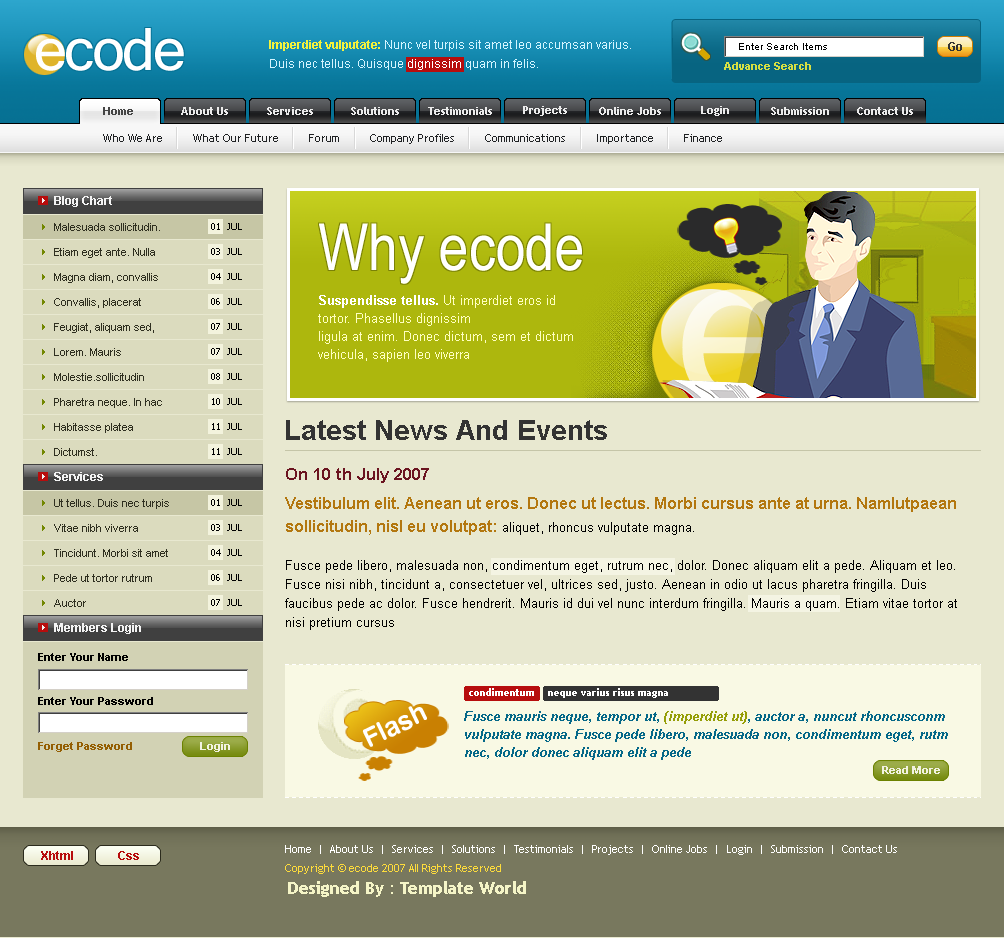
<style>
.page{position:relative;width:1004px;height:938px;background:#e8e8d0}
.page>*{position:absolute;margin:0}
.t1{font:89px "Vrinda";letter-spacing:-0.025em;color:#ffffff}
.t2{font:12px/19px "ArialMT";color:#d4f5ff}
.t3{font:12px/19px "Arial-BoldMT";color:#f4f23c}
.t4{font:12px/19px "ArialMT";color:#ffffff}
.t5{font:10px "ArialMT";color:#000000}
.t6{font:12px "Arial-BoldMT";color:#333333}
.t7{font:11px "Arial-BoldMT";color:#d6df43}
.t8{font:11px "TrebuchetMS-Bold";color:#444444}
.t9{font:11px "TrebuchetMS-Bold";color:#ebebeb}
.t10{font:11px "TrebuchetMS";color:#1f2123}
.t11{font:12px "Arial-BoldMT";color:#f3f3f3}
.t12{font:11px/25px "ArialMT";color:#2f2f20}
.t13{font:10px "Tahoma";color:#000000;text-transform:uppercase}
.t14{font:65px "ArialNarrow";color:#ffffff}
.t15{font:327px "Vrinda";letter-spacing:-0.025em}
.t16{font:13px/18px "ArialMT";color:#ffffc1}
.t17{font:13px/18px "Arial-BoldMT";color:#ffffff}
.t18{font:28px "Arial-BoldMT";color:#333333}
.t19{font:17px "Arial-BoldMT";color:#6b1420}
.t20{font:13px/19px "ArialMT";color:#000000}
.t21{font:16px/23px "Arial-BoldMT";color:#b3770f}
.t22{font:13px/23px "ArialMT";color:#000000}
.t23{font:11px "Arial-BoldMT";color:#000000}
.t24{font:10px "TrebuchetMS-Bold";color:#ffffff}
.t25{font:26px "Swiss721BT-BoldRounded";color:#ffffff}
.t26{font:13px/18px "Arial-BoldItalicMT";color:#056888}
.t27{font:13px/18px "Arial-BoldItalicMT";color:#959e07}
.t28{font:11px "Arial-BoldMT";color:#945e02}
.t29{font:11px "Arial-BoldMT";color:#f2f2e2}
.t30{font:11px "TrebuchetMS";color:#ffffff}
.t31{font:12px "Arial-BoldMT";color:#b70d0d}
.t32{font:11px "TrebuchetMS";color:#fedc3b}
.t33{font:17px "TrebuchetMS-Bold";color:#f5f5c7}
</style>
<div class="page">
<p class="t1" style="left:36px;top:28px;width:148px;height:43px">ecode</p>
<p class="t2" style="left:269px;top:40px;width:362px;height:30px"><span class="t3">Imperdiet vulputate: </span>Nunc vel turpis sit amet leo accumsan varius. <br>Duis nec tellus. Quisque <span class="t4">dignissim</span> quam in felis.</p>
<p class="t5" style="left:739px;top:43px;width:88px;height:7px">Enter Search Items</p>
<p class="t6" style="left:948px;top:42px;width:14px;height:9px">Go</p>
<p class="t7" style="left:724px;top:62px;width:87px;height:8px">Advance Search</p>
<p class="t8" style="left:103px;top:107px;width:30px;height:8px">Home</p>
<p class="t9" style="left:181px;top:107px;width:47px;height:8px">About Us</p>
<p class="t9" style="left:267px;top:107px;width:46px;height:8px">Services</p>
<p class="t9" style="left:351px;top:107px;width:48px;height:8px">Solutions</p>
<p class="t9" style="left:428px;top:107px;width:64px;height:8px">Testimonials</p>
<p class="t9" style="left:523px;top:106px;width:44px;height:10px">Projects</p>
<p class="t9" style="left:599px;top:107px;width:62px;height:8px">Online Jobs</p>
<p class="t9" style="left:701px;top:106px;width:28px;height:10px">Login</p>
<p class="t9" style="left:771px;top:107px;width:58px;height:8px">Submission</p>
<p class="t9" style="left:857px;top:107px;width:56px;height:8px">Contact Us</p>
<p class="t10" style="left:103px;top:134px;width:619px;height:10px">Who We Are          What Our Future          Forum          Company Profiles          Communications          Importance          Finance</p>
<p class="t11" style="left:54px;top:196px;width:58px;height:11px">Blog Chart</p>
<p class="t12" style="left:54px;top:223px;width:108px;height:233px">Malesuada sollicitudin. Etiam eget ante. Nulla Magna diam, convallis Convallis, placerat Feugiat, aliquam sed, Lorem. Mauris Molestie.sollicitudin Pharetra neque. In hac Habitasse platea Dictumst.</p>
<p class="t13" style="left:211px;top:223px;width:31px;height:7px">01  jul</p>
<p class="t14" style="left:319px;top:223px;width:263px;height:61px">Why ecode</p>
<p class="t13" style="left:211px;top:248px;width:31px;height:7px">03  jul</p>
<p class="t13" style="left:211px;top:273px;width:31px;height:7px">04  jul</p>
<p class="t15" style="left:682px;top:289px;width:106px;height:118px">e</p>
<p class="t13" style="left:211px;top:298px;width:31px;height:7px">06  jul</p>
<p class="t16" style="left:318px;top:295px;width:255px;height:67px"><span class="t17">Suspendisse tellus. </span>Ut imperdiet eros id tortor. Phasellus dignissim <br>ligula at enim. Donec dictum, sem et dictum vehicula, sapien leo viverra</p>
<p class="t13" style="left:211px;top:323px;width:31px;height:7px">07  jul</p>
<p class="t13" style="left:211px;top:348px;width:31px;height:7px">07  jul</p>
<p class="t13" style="left:211px;top:373px;width:31px;height:7px">08  jul</p>
<p class="t13" style="left:212px;top:398px;width:30px;height:7px">10  jul</p>
<p class="t13" style="left:212px;top:423px;width:30px;height:7px">11  jul</p>
<p class="t18" style="left:286px;top:420px;width:321px;height:20px">Latest News And Events</p>
<p class="t13" style="left:212px;top:448px;width:30px;height:7px">11  jul</p>
<p class="t11" style="left:54px;top:472px;width:49px;height:9px">Services</p>
<p class="t19" style="left:286px;top:468px;width:143px;height:15px">On 10 th July 2007</p>
<p class="t20" style="left:285px;top:497px;width:672px;height:133px"><span class="t21">Vestibulum elit. Aenean ut eros. Donec ut lectus. Morbi cursus ante at urna. Namlutpaean sollicitudin, nisl eu volutpat: </span><span class="t22">aliquet, rhoncus vulputate magna.</span> <br><br>Fusce pede libero, malesuada non, condimentum eget, rutrum nec, dolor. Donec aliquam elit a pede. Aliquam et leo. Fusce nisi nibh, tincidunt a, consectetuer vel, ultrices sed, justo. Aenean in odio ut lacus pharetra fringilla. Duis faucibus pede ac dolor. Fusce hendrerit. Mauris id dui vel nunc interdum fringilla. Mauris a quam. Etiam vitae tortor at nisi pretium cursus</p>
<p class="t12" style="left:54px;top:499px;width:115px;height:108px">Ut tellus. Duis nec turpis Vitae nibh viverra Tincidunt. Morbi sit amet Pede ut tortor rutrum Auctor</p>
<p class="t13" style="left:211px;top:499px;width:31px;height:7px">01  jul</p>
<p class="t13" style="left:211px;top:524px;width:31px;height:7px">03  jul</p>
<p class="t13" style="left:211px;top:549px;width:31px;height:7px">04  jul</p>
<p class="t13" style="left:211px;top:574px;width:31px;height:7px">06  jul</p>
<p class="t13" style="left:211px;top:599px;width:31px;height:7px">07  jul</p>
<p class="t11" style="left:54px;top:623px;width:87px;height:11px">Members Login</p>
<p class="t23" style="left:38px;top:653px;width:90px;height:8px">Enter Your Name</p>
<p class="t24" style="left:469px;top:688px;width:65px;height:8px">condimentum</p>
<p class="t24" style="left:548px;top:688px;width:120px;height:10px">neque varius risus magna</p>
<p class="t23" style="left:38px;top:697px;width:115px;height:8px">Enter Your Password</p>
<p class="t25" style="left:362px;top:706px;width:65px;height:41px;rotate:-26deg">Flash</p>
<p class="t26" style="left:464px;top:711px;width:484px;height:49px">Fusce mauris neque, tempor ut, <span class="t27">(imperdiet ut)</span>, auctor a, nuncut rhoncusconm vulputate magna. Fusce pede libero, malesuada non, condimentum eget, rutm nec, dolor donec aliquam elit a pede</p>
<p class="t28" style="left:38px;top:742px;width:94px;height:10px">Forget Password</p>
<p class="t29" style="left:200px;top:742px;width:30px;height:10px">Login</p>
<p class="t29" style="left:882px;top:766px;width:58px;height:8px">Read More</p>
<p class="t30" style="left:285px;top:845px;width:612px;height:10px">Home  |  About Us  |  Services  |  Solutions  |  Testimonials  |  Projects  |  Online Jobs  |  Login  |  Submission  |  Contact Us</p>
<p class="t31" style="left:41px;top:851px;width:32px;height:9px">Xhtml</p>
<p class="t31" style="left:118px;top:851px;width:21px;height:9px">Css</p>
<p class="t32" style="left:285px;top:864px;width:216px;height:10px">Copyright © ecode 2007 All Rights Reserved</p>
<p class="t33" style="left:288px;top:881px;width:238px;height:16px">Designed By : Template World</p>
</div>
